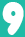
<style>
.page{position:relative;width:25px;height:37px;background:#1fbba6}
.page>*{position:absolute;margin:0}
.t1{font:45px "Valken";color:#ffffff;scale:0.8 1}
</style>
<div class="page">
<p class="t1" style="left:2px;top:2px;width:22px;height:33px">9</p>
</div>
